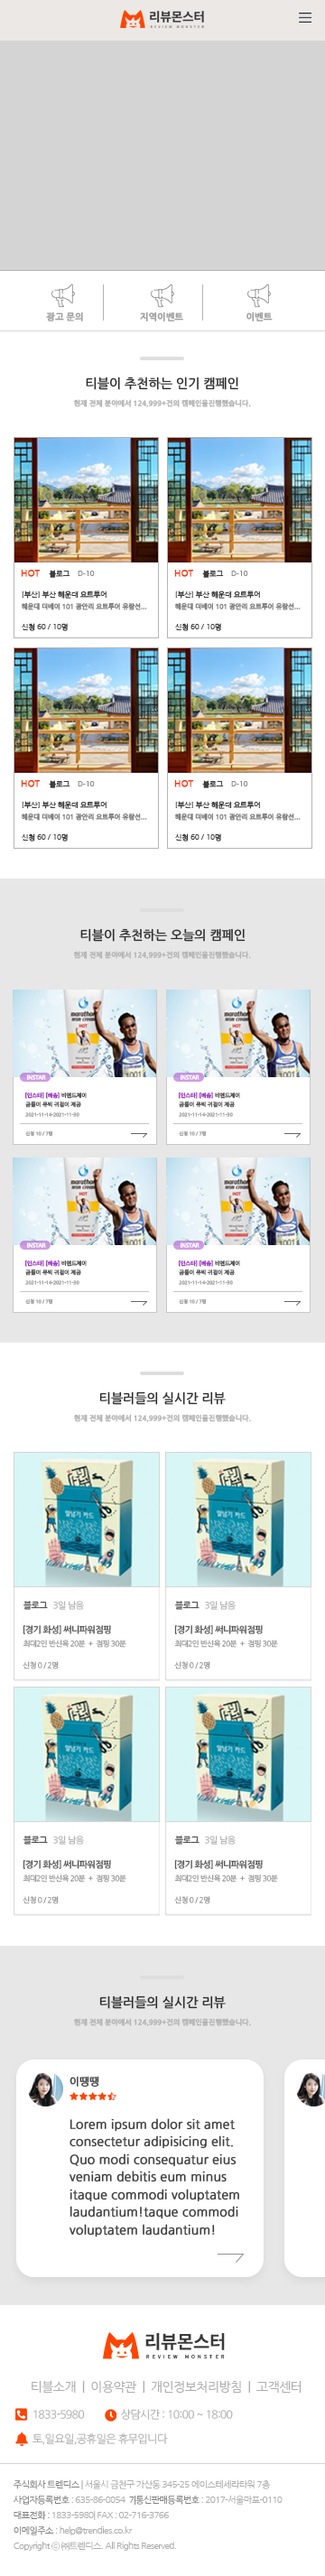
<style>
.page{position:relative;width:325px;height:2576px;background:#ffffff}
.page>*{position:absolute;margin:0}
.t1{font:9px "NanumGothicBold";letter-spacing:-0.02em;color:#a0a0a0;font-weight:bold}
.t2{font:12.6px "NanumGothic";letter-spacing:-0.02em;color:#2e2e2e;font-weight:bold}
.t3{font:7.1px "NanumGothicBold";letter-spacing:-0.02em;color:#b4b4b4;font-weight:bold}
.t4{font:9.1px "NanumGothic";letter-spacing:-0.02em;color:#fe3700;font-weight:bold}
.t5{font:7.1px "NanumGothic";letter-spacing:-0.02em;color:#8d8d8d;font-weight:bold}
.t6{font:7.1px "NanumGothic";letter-spacing:-0.02em;color:#3e3e3e;font-weight:bold}
.t7{font:6.5px/11.6px "NanumGothic";letter-spacing:-0.02em;color:#818181;font-weight:bold}
.t8{font:7.1px/12.9px "NanumGothic";letter-spacing:-0.02em;color:#3e3e3e;font-weight:bold}
.t9{font:5.3px "NanumGothic";letter-spacing:-0.02em;color:#fefefe;font-weight:bold}
.t10{font:5.3px "NanumGothic";letter-spacing:-0.02em;color:#a239c8;font-weight:bold}
.t11{font:5.3px "NanumGothic";letter-spacing:-0.02em;color:#5a5a5a;font-weight:bold}
.t12{font:5.3px "NanumGothic";letter-spacing:-0.02em;color:#646464;font-weight:bold}
.t13{font:4.6px "NanumGothic";letter-spacing:-0.02em;color:#a4a4a4;font-weight:bold}
.t14{font:8.9px "NanumGothic";letter-spacing:-0.06em;color:#aeaeae}
.t15{font:8.9px "NanumGothicBold";letter-spacing:-0.06em;color:#565656}
.t16{font:7.4px "NanumGothic";letter-spacing:-0.06em;color:#9b9b9b}
.t17{font:10.4px "NanumGothic";letter-spacing:-0.02em;color:#444444;font-weight:bold}
.t18{font:12.4px/17.6px "NanumGothic";color:#3f3f3f;font-weight:bold}
.t19{font:12.6px "NanumGothic";letter-spacing:-0.04em;color:#aeaeae}
.t20{font:11.1px/12.5px "NanumGothic";letter-spacing:-0.06em;color:#aeaeae}
.t21{font:9px/15.3px "NanumGothic";letter-spacing:-0.06em;color:#aeaeae}
.t22{font:9px/15.3px "NanumGothic";letter-spacing:-0.06em;color:#838282}
.t23{font:9px/15.3px "NanumGothic";letter-spacing:-0.06em;color:#929292}
.t24{font:9px/15.3px "NanumGothic";letter-spacing:-0.06em;color:#828282}
</style>
<div class="page">
<p class="t1" style="left:46px;top:312px;width:37px;height:9px">광고 문의</p>
<p class="t1" style="left:140px;top:312px;width:43px;height:9px">지역이벤트</p>
<p class="t1" style="left:246px;top:312px;width:27px;height:9px">이벤트</p>
<p class="t2" style="left:86px;top:377px;width:152px;height:13px">티블이 추천하는 인기 캠페인</p>
<p class="t3" style="left:73px;top:399px;width:178px;height:8px">현재 전체 분야에서 124,999+건의 캠페인을진행했습니다.</p>
<p class="t4" style="left:21px;top:570px;width:19px;height:7px">HOT</p>
<p class="t5" style="left:49px;top:570px;width:46px;height:8px"><span class="t6">블로그    </span>D-10</p>
<p class="t4" style="left:174px;top:570px;width:19px;height:7px">HOT</p>
<p class="t5" style="left:202px;top:570px;width:46px;height:8px"><span class="t6">블로그    </span>D-10</p>
<p class="t7" style="left:21px;top:591px;width:126px;height:19px"><span class="t8">[부산] 부산 해운대 요트투어<br></span>해운대 더베이 101 광안리 요트투어 유람선...</p>
<p class="t7" style="left:174px;top:591px;width:127px;height:19px"><span class="t8">[부산] 부산 해운대 요트투어<br></span>해운대 더베이 101 광안리 요트투어 유람선...</p>
<p class="t6" style="left:22px;top:623px;width:46px;height:8px">신청 60 / 10명</p>
<p class="t6" style="left:175px;top:623px;width:46px;height:8px">신청 60 / 10명</p>
<p class="t4" style="left:21px;top:780px;width:19px;height:7px">HOT</p>
<p class="t5" style="left:49px;top:780px;width:46px;height:8px"><span class="t6">블로그    </span>D-10</p>
<p class="t4" style="left:174px;top:780px;width:19px;height:7px">HOT</p>
<p class="t5" style="left:202px;top:780px;width:46px;height:8px"><span class="t6">블로그    </span>D-10</p>
<p class="t7" style="left:21px;top:801px;width:126px;height:20px"><span class="t8">[부산] 부산 해운대 요트투어<br></span>해운대 더베이 101 광안리 요트투어 유람선...</p>
<p class="t7" style="left:174px;top:801px;width:127px;height:20px"><span class="t8">[부산] 부산 해운대 요트투어<br></span>해운대 더베이 101 광안리 요트투어 유람선...</p>
<p class="t6" style="left:22px;top:833px;width:46px;height:9px">신청 60 / 10명</p>
<p class="t6" style="left:175px;top:833px;width:46px;height:9px">신청 60 / 10명</p>
<p class="t2" style="left:80px;top:928px;width:166px;height:14px">티블이 추천하는 오늘의 캠페인</p>
<p class="t3" style="left:73px;top:951px;width:178px;height:8px">현재 전체 분야에서 124,999+건의 캠페인을진행했습니다.</p>
<p class="t9" style="left:27px;top:1074px;width:19px;height:6px">INSTAR</p>
<p class="t9" style="left:181px;top:1074px;width:19px;height:6px">INSTAR</p>
<p class="t10" style="left:25px;top:1093px;width:62px;height:6px">[인스타] [배송] <span class="t11">비엔드제이</span></p>
<p class="t10" style="left:179px;top:1093px;width:61px;height:6px">[인스타] [배송] <span class="t11">비엔드제이</span></p>
<p class="t12" style="left:25px;top:1102px;width:56px;height:6px">곰돌이 큐빅 귀걸이 제공</p>
<p class="t12" style="left:179px;top:1102px;width:56px;height:6px">곰돌이 큐빅 귀걸이 제공</p>
<p class="t13" style="left:25px;top:1112px;width:54px;height:5px">2021-11-14-2021-11-30</p>
<p class="t13" style="left:179px;top:1112px;width:54px;height:5px">2021-11-14-2021-11-30</p>
<p class="t13" style="left:25px;top:1130px;width:27px;height:7px">신청 10 / 7명</p>
<p class="t13" style="left:179px;top:1130px;width:27px;height:7px">신청 10 / 7명</p>
<p class="t9" style="left:27px;top:1242px;width:19px;height:6px">INSTAR</p>
<p class="t9" style="left:181px;top:1242px;width:19px;height:6px">INSTAR</p>
<p class="t10" style="left:25px;top:1260px;width:62px;height:7px">[인스타] [배송] <span class="t11">비엔드제이</span></p>
<p class="t10" style="left:179px;top:1260px;width:61px;height:7px">[인스타] [배송] <span class="t11">비엔드제이</span></p>
<p class="t12" style="left:25px;top:1269px;width:56px;height:7px">곰돌이 큐빅 귀걸이 제공</p>
<p class="t12" style="left:179px;top:1269px;width:56px;height:7px">곰돌이 큐빅 귀걸이 제공</p>
<p class="t13" style="left:25px;top:1280px;width:54px;height:5px">2021-11-14-2021-11-30</p>
<p class="t13" style="left:179px;top:1280px;width:54px;height:5px">2021-11-14-2021-11-30</p>
<p class="t13" style="left:25px;top:1298px;width:27px;height:7px">신청 10 / 7명</p>
<p class="t13" style="left:179px;top:1298px;width:27px;height:7px">신청 10 / 7명</p>
<p class="t2" style="left:99px;top:1391px;width:127px;height:14px">티블러들의 실시간 리뷰</p>
<p class="t3" style="left:74px;top:1414px;width:177px;height:8px">현재 전체 분야에서 124,999+건의 캠페인을진행했습니다.</p>
<p class="t14" style="left:23px;top:1601px;width:61px;height:9px"><span class="t15">블로그</span>   3일 남음</p>
<p class="t14" style="left:174px;top:1601px;width:62px;height:9px"><span class="t15">블로그</span>   3일 남음</p>
<p class="t15" style="left:23px;top:1625px;width:88px;height:9px">[경기 화성] 써니파워점핑</p>
<p class="t15" style="left:174px;top:1625px;width:89px;height:9px">[경기 화성] 써니파워점핑</p>
<p class="t16" style="left:23px;top:1640px;width:103px;height:8px">최대2인 반신욕 20분  +  점핑 30분</p>
<p class="t16" style="left:174px;top:1640px;width:104px;height:8px">최대2인 반신욕 20분  +  점핑 30분</p>
<p class="t16" style="left:23px;top:1661px;width:36px;height:8px">신청 0 / 2명</p>
<p class="t16" style="left:174px;top:1661px;width:36px;height:8px">신청 0 / 2명</p>
<p class="t14" style="left:23px;top:1836px;width:61px;height:9px"><span class="t15">블로그</span>   3일 남음</p>
<p class="t14" style="left:174px;top:1836px;width:62px;height:9px"><span class="t15">블로그</span>   3일 남음</p>
<p class="t15" style="left:23px;top:1860px;width:88px;height:9px">[경기 화성] 써니파워점핑</p>
<p class="t15" style="left:174px;top:1860px;width:89px;height:9px">[경기 화성] 써니파워점핑</p>
<p class="t16" style="left:23px;top:1874px;width:103px;height:9px">최대2인 반신욕 20분  +  점핑 30분</p>
<p class="t16" style="left:174px;top:1874px;width:104px;height:9px">최대2인 반신욕 20분  +  점핑 30분</p>
<p class="t16" style="left:23px;top:1896px;width:36px;height:8px">신청 0 / 2명</p>
<p class="t16" style="left:174px;top:1896px;width:36px;height:8px">신청 0 / 2명</p>
<p class="t2" style="left:99px;top:1995px;width:127px;height:14px">티블러들의 실시간 리뷰</p>
<p class="t3" style="left:74px;top:2018px;width:177px;height:8px">현재 전체 분야에서 124,999+건의 캠페인을진행했습니다.</p>
<p class="t17" style="left:70px;top:2076px;width:29px;height:12px">이땡땡</p>
<p class="t18" style="left:69px;top:2118px;width:170px;height:119px">Lorem ipsum dolor sit amet <br>consectetur adipisicing elit. <br>Quo modi consequatur eius <br>veniam debitis eum minus <br>itaque commodi voluptatem <br>laudantium!taque commodi <br>voluptatem laudantium!</p>
<p class="t19" style="left:32px;top:2380px;width:270px;height:14px">티블소개  |  이용약관  |  개인정보처리방침  |  고객센터</p>
<p class="t20" style="left:32px;top:2409px;width:201px;height:36px">1833-5980               상담시간 : 10:00 ~ 18:00<br><br> 토,일요일,공휴일은 휴무입니다</p>
<p class="t21" style="left:13px;top:2480px;width:270px;height:71px"><span class="t22">주식회사 트렌디스</span><span class="t23"> |</span> 서울시 금천구 가산동 345-25 에이스테세라타워 7층<br><span class="t24">사업자등록번호 </span>: 635-86-0054  <span class="t24">7|통신판매등록번호 </span>: 2017-서울마포-0110<br><span class="t24">대표전화 : </span>1833-5980| FAX : 02-716-3766<br><span class="t24">이메일주소 </span>: help@trendies.co.kr<br>Copyright ⓒ ㈜트렌디스. All Rights Reserved.</p>
</div>
